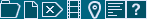
<style>
.page{position:relative;width:147px;height:19px;background:#005166}
.page>*{position:absolute;margin:0}
.t1{font:16px "Helvetica-Bold";color:#dfe6fa}
</style>
<div class="page">
<p class="t1" style="left:132px;top:3px;width:8px;height:12px">?</p>
</div>
